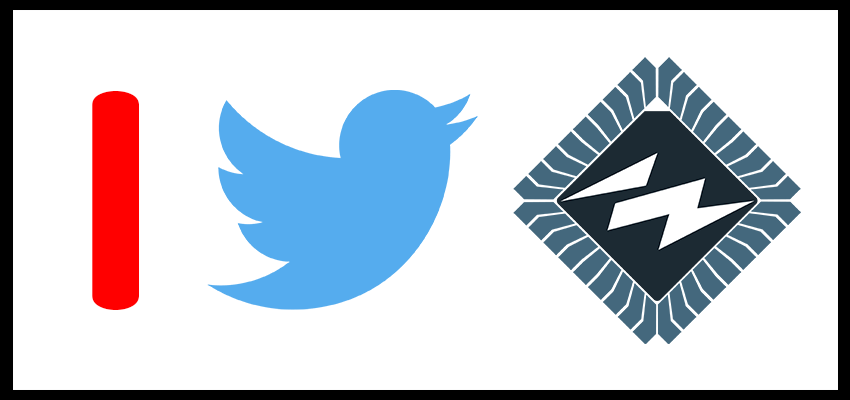
<style>
.page{position:relative;width:850px;height:400px;background:#ffffff}
.page>*{position:absolute;margin:0}
.t1{font:300px "Dosis-ExtraBold";color:#ff0000}
</style>
<div class="page">
<p class="t1" style="left:92px;top:91px;width:47px;height:219px">I</p>
</div>
